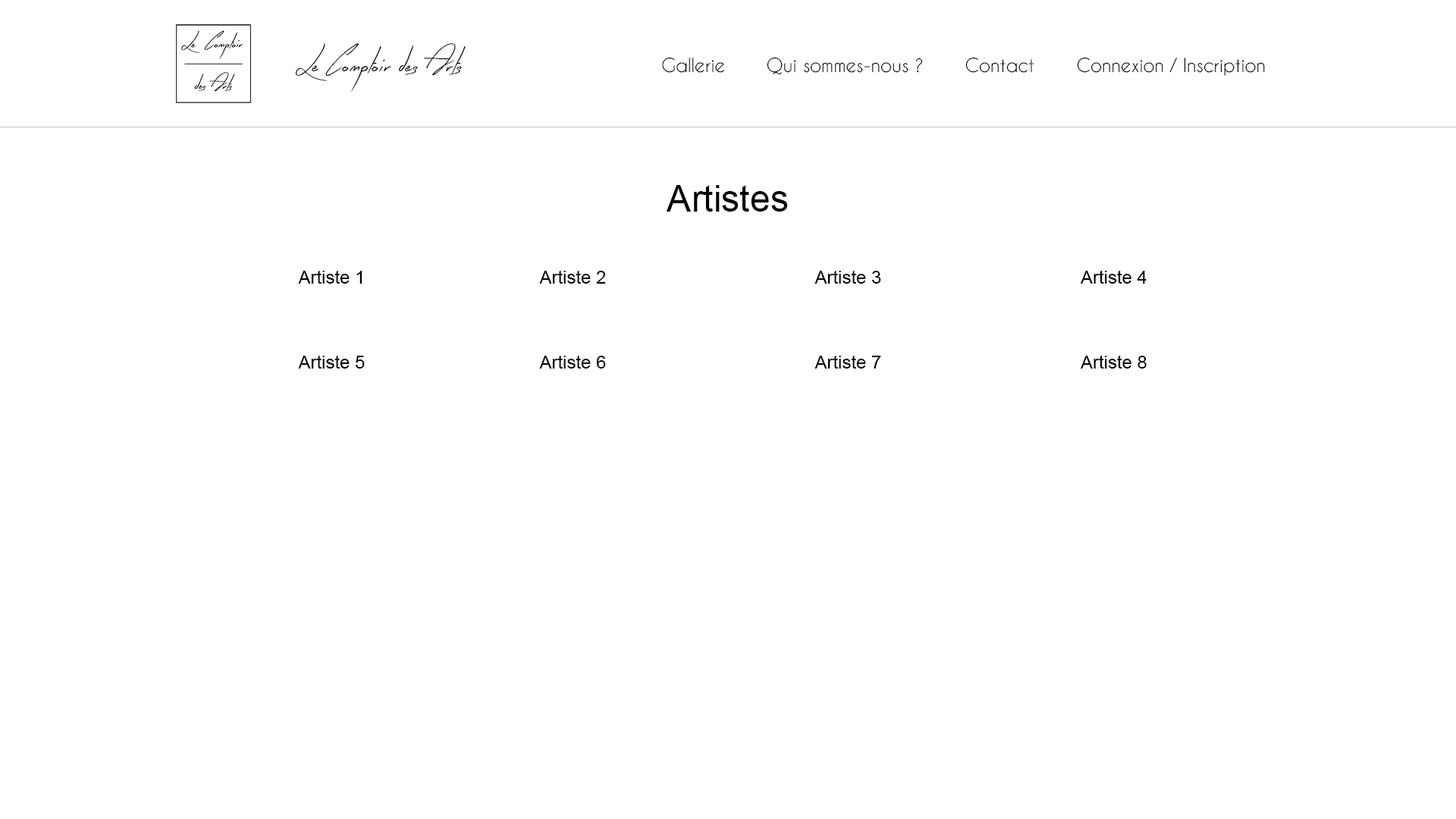
<style>
.page{position:relative;width:1456px;height:819px;background:#ffffff}
.page>*{position:absolute;margin:0}
.t1{font:33.4px "EarlyBird";color:#000000}
.t2{font:18.2px "CaviarDreams";color:#000000}
.t3{font:36.4px "ArialMT";color:#000000}
.t4{font:18.2px "ArialMT";color:#000000}
</style>
<div class="page">
<p class="t1" style="left:295px;top:43px;width:171px;height:49px">Le Comptoir des Arts</p>
<p class="t2" style="left:662px;top:57px;width:63px;height:16px">Gallerie</p>
<p class="t2" style="left:767px;top:57px;width:156px;height:18px">Qui sommes-nous ?</p>
<p class="t2" style="left:965px;top:57px;width:69px;height:16px">Contact</p>
<p class="t2" style="left:1077px;top:57px;width:188px;height:19px">Connexion / Inscription</p>
<p class="t3" style="left:666px;top:185px;width:122px;height:27px">Artistes</p>
<p class="t4" style="left:298px;top:270px;width:64px;height:14px">Artiste 1</p>
<p class="t4" style="left:539px;top:270px;width:67px;height:14px">Artiste 2</p>
<p class="t4" style="left:814px;top:270px;width:67px;height:14px">Artiste 3</p>
<p class="t4" style="left:1081px;top:270px;width:66px;height:14px">Artiste 4</p>
<p class="t4" style="left:298px;top:355px;width:67px;height:14px">Artiste 5</p>
<p class="t4" style="left:539px;top:355px;width:67px;height:14px">Artiste 6</p>
<p class="t4" style="left:814px;top:355px;width:67px;height:14px">Artiste 7</p>
<p class="t4" style="left:1081px;top:355px;width:66px;height:14px">Artiste 8</p>
</div>
